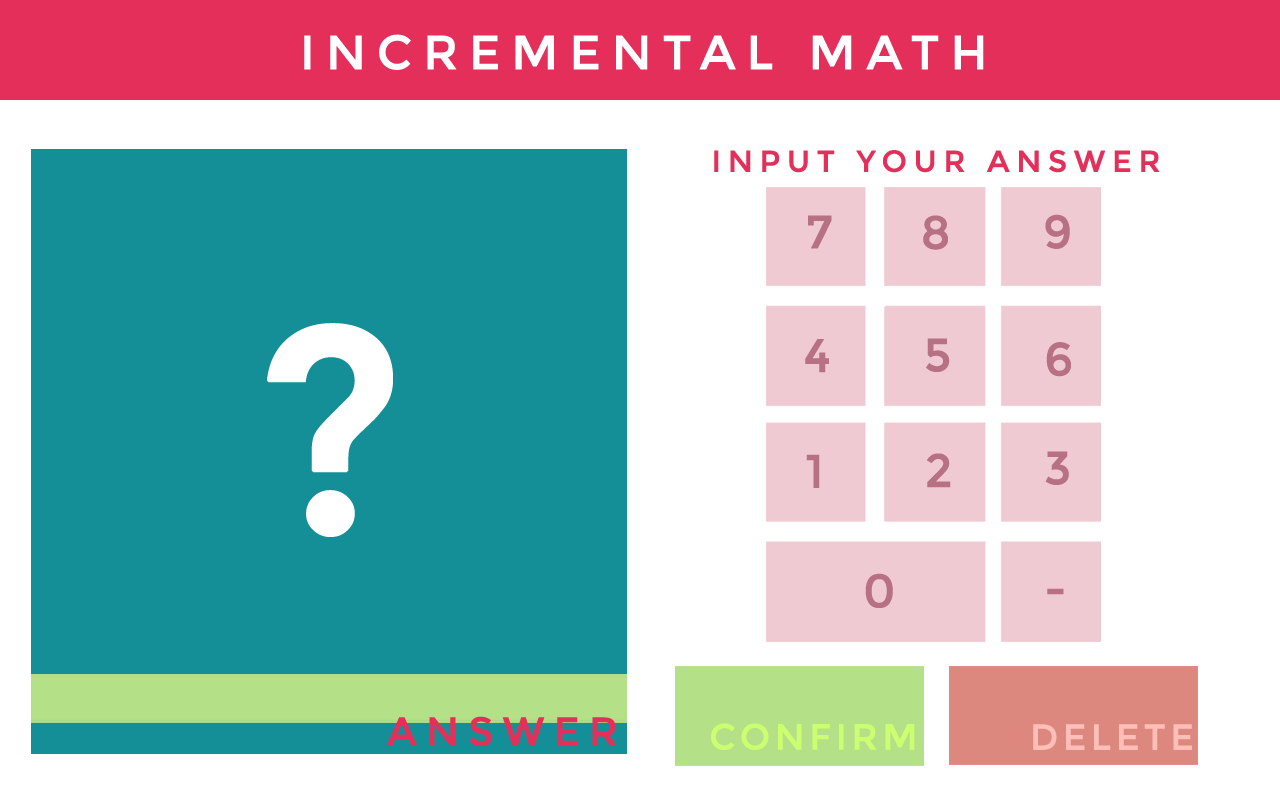
<style>
.page{position:relative;width:1280px;height:800px;background:#ffffff}
.page>*{position:absolute;margin:0}
.t1{font:48px "Montserrat-Regular";letter-spacing:0.2em;color:#ffffff;text-transform:uppercase;font-weight:bold}
.t2{font:30px "Montserrat-Regular";letter-spacing:0.2em;color:#e42f5a;text-transform:uppercase;font-weight:bold}
.t3{font:46.4px "Montserrat-Regular";letter-spacing:0.2em;color:#b77182;text-transform:uppercase;font-weight:bold}
.t4{font:292.4px "Montserrat-Regular";letter-spacing:0.2em;color:#ffffff;text-transform:uppercase;font-weight:bold}
.t5{font:40px "Montserrat-Regular";letter-spacing:0.2em;color:#e42f5a;text-transform:uppercase;font-weight:bold}
.t6{font:36px "Montserrat-Regular";letter-spacing:0.1em;color:#ccff6f;text-transform:uppercase;font-weight:bold}
.t7{font:36px "Montserrat-Regular";letter-spacing:0.1em;color:#ffbfb8;text-transform:uppercase;font-weight:bold}
</style>
<div class="page">
<p class="t1" style="left:304px;top:34px;width:680px;height:36px">Incremental Math</p>
<p class="t2" style="left:714px;top:150px;width:446px;height:23px">Input your Answer</p>
<p class="t3" style="left:808px;top:215px;width:24px;height:34px">7</p>
<p class="t3" style="left:923px;top:215px;width:25px;height:35px">8</p>
<p class="t3" style="left:1045px;top:214px;width:25px;height:35px">9</p>
<p class="t4" style="left:267px;top:323px;width:126px;height:214px">?</p>
<p class="t3" style="left:805px;top:339px;width:24px;height:34px">4</p>
<p class="t3" style="left:926px;top:338px;width:24px;height:34px">5</p>
<p class="t3" style="left:1046px;top:342px;width:25px;height:35px">6</p>
<p class="t3" style="left:806px;top:454px;width:14px;height:34px">1</p>
<p class="t3" style="left:927px;top:453px;width:24px;height:35px">2</p>
<p class="t3" style="left:1045px;top:451px;width:24px;height:34px">3</p>
<p class="t3" style="left:865px;top:573px;width:28px;height:35px">0</p>
<p class="t3" style="left:1047px;top:588px;width:17px;height:7px">-</p>
<p class="t5" style="left:386px;top:716px;width:231px;height:31px">Answer</p>
<p class="t6" style="left:711px;top:723px;width:204px;height:27px">Confirm</p>
<p class="t7" style="left:1033px;top:724px;width:159px;height:26px">Delete</p>
</div>
